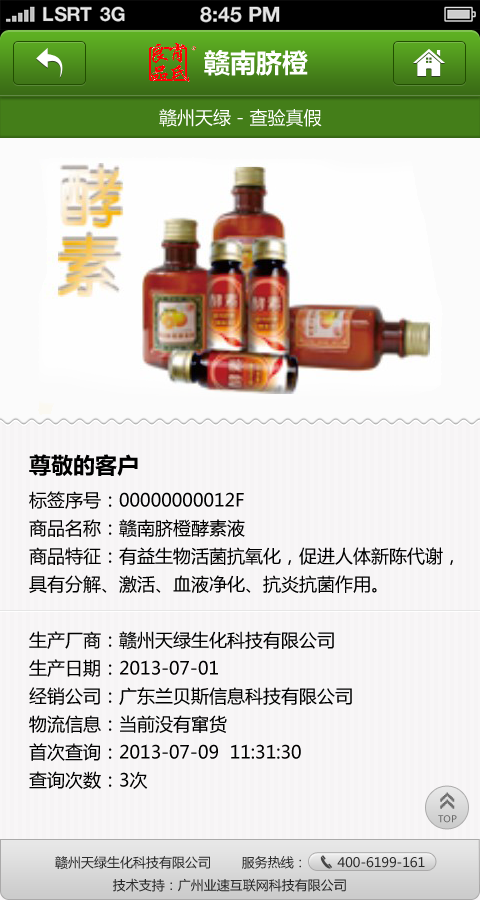
<style>
.page{position:relative;width:480px;height:900px;background:#f6f4f5}
.page>*{position:absolute;margin:0}
.t1{font:26px "MicrosoftYaHeiBold";color:#ffffff}
.t2{font:18px "MicrosoftYaHei";color:#ffffff}
.t3{font:18px/28px "MicrosoftYaHei";color:#000000}
.t4{font:22px/37px "MicrosoftYaHeiBold";color:#000000}
.t5{font:26px "8514oem";letter-spacing:-0.2em;color:#6f6f6f;font-weight:bold}
.t6{font:9.3px "MicrosoftYaHei";color:#686868}
.t7{font:13px "MicrosoftYaHei";color:#2c2c2c}
</style>
<div class="page">
<p class="t1" style="left:204px;top:50px;width:104px;height:26px">赣南脐橙</p>
<p class="t2" style="left:159px;top:108px;width:163px;height:19px">赣州天绿 - 查验真假</p>
<p class="t3" style="left:29px;top:454px;width:424px;height:335px"><span class="t4">尊敬的客户<br></span>标签序号：00000000012F<br>商品名称：赣南脐橙酵素液<br>商品特征：有益生物活菌抗氧化，促进人体新陈代谢，<br>具有分解、激活、血液净化、抗炎抗菌作用。<br> <br>生产厂商：赣州天绿生化科技有限公司<br>生产日期：2013-07-01<br>经销公司：广东兰贝斯信息科技有限公司<br>物流信息：当前没有窜货<br>首次查询：2013-07-09  11:31:30<br>查询次数：3次</p>
<p class="t5" style="left:440px;top:792px;width:15px;height:17px;rotate:-90deg">&gt;&gt;</p>
<p class="t6" style="left:438px;top:815px;width:19px;height:8px">TOP</p>
<p class="t7" style="left:55px;top:856px;width:370px;height:36px">赣州天绿生化科技有限公司        服务热线：        400-6199-161<br>               技术支持：广州业速互联网科技有限公司</p>
</div>
